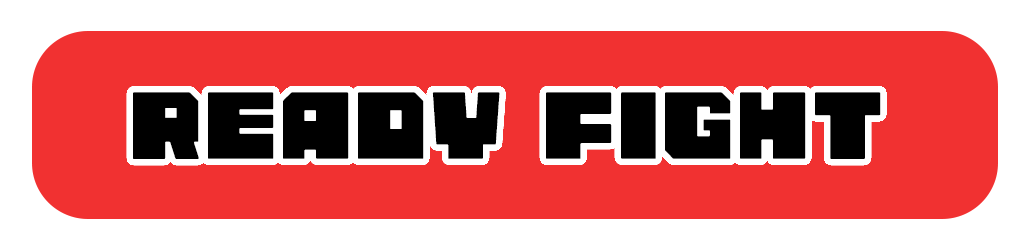
<style>
.page{position:relative;width:1030px;height:250px;background:#f13131}
.page>*{position:absolute;margin:0}
.t1{font:75px "AB-countryroad";color:#000000}
</style>
<div class="page">
<p class="t1" style="left:133px;top:92px;width:748px;height:67px">READY FIGHT</p>
</div>
